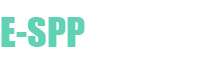
<style>
.page{position:relative;width:200px;height:60px;background:#ffffff}
.page>*{position:absolute;margin:0}
.t1{font:38.3px "Impact";color:#61d2b4}
</style>
<div class="page">
<p class="t1" style="left:1px;top:17px;width:84px;height:30px">E-SPP</p>
</div>
